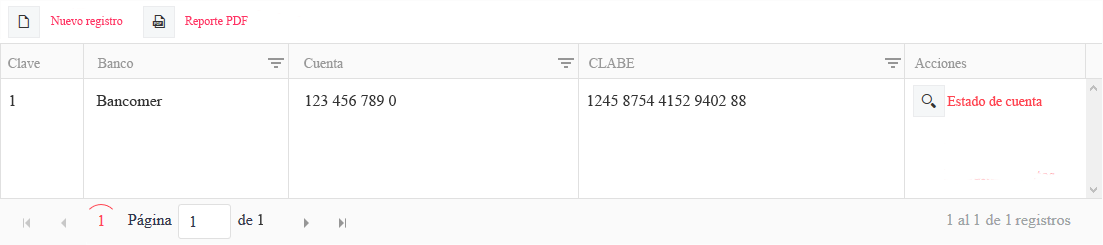
<style>
.page{position:relative;width:1103px;height:245px;background:#ffffff}
.page>*{position:absolute;margin:0}
.t1{font:12px "TimesNewRomanPSMT";color:#ff3366}
.t2{font:14px "TimesNewRomanPSMT";color:#999999}
.t3{font:16px "TimesNewRomanPSMT";color:#333333}
</style>
<div class="page">
<p class="t1" style="left:50px;top:16px;width:73px;height:12px">Nuevo registro</p>
<p class="t1" style="left:185px;top:16px;width:63px;height:12px">Reporte PDF</p>
<p class="t2" style="left:8px;top:58px;width:32px;height:10px">Clave</p>
<p class="t2" style="left:97px;top:58px;width:37px;height:10px">Banco</p>
<p class="t2" style="left:304px;top:58px;width:40px;height:10px">Cuenta</p>
<p class="t2" style="left:589px;top:58px;width:46px;height:10px">CLABE</p>
<p class="t2" style="left:914px;top:58px;width:53px;height:10px">Acciones</p>
<p class="t3" style="left:10px;top:95px;width:5px;height:11px">1</p>
<p class="t3" style="left:96px;top:95px;width:67px;height:11px">Bancomer</p>
<p class="t3" style="left:306px;top:95px;width:90px;height:11px">123 456 789 0</p>
<p class="t3" style="left:588px;top:95px;width:158px;height:11px">1245 8754 4152 9402 88</p>
</div>
